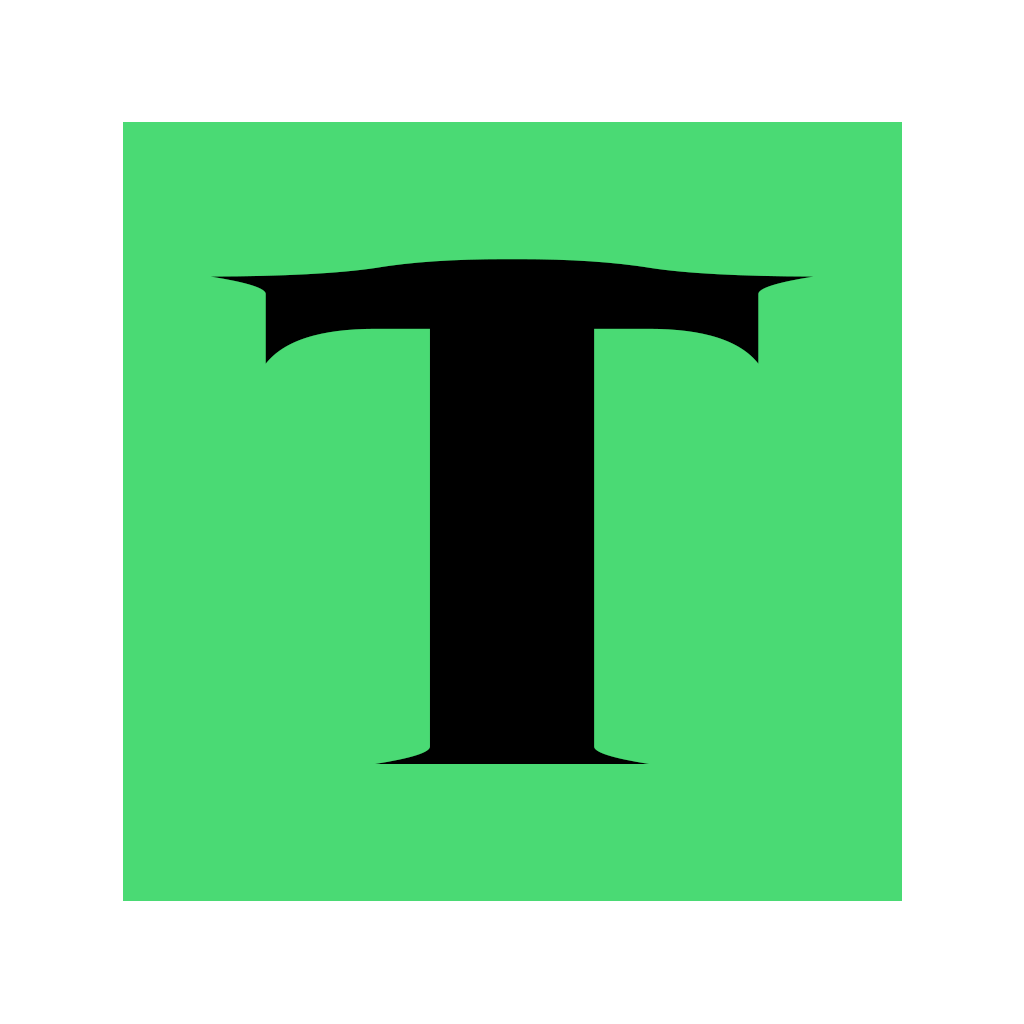
<style>
.page{position:relative;width:1024px;height:1024px;background:#4ada74}
.page>*{position:absolute;margin:0}
.t1{font:712.6px "Steamwreck";color:#000000;scale:3.15 1}
</style>
<div class="page">
<p class="t1" style="left:211px;top:259px;width:603px;height:505px">T</p>
</div>
